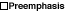
<style>
.page{position:relative;width:67px;height:12px;background:#ffffff}
.page>*{position:absolute;margin:0}
.t1{font:9px "Helvetica-Bold";color:#000000}
</style>
<div class="page">
<p class="t1" style="left:9px;top:2px;width:56px;height:9px">Preemphasis</p>
</div>
